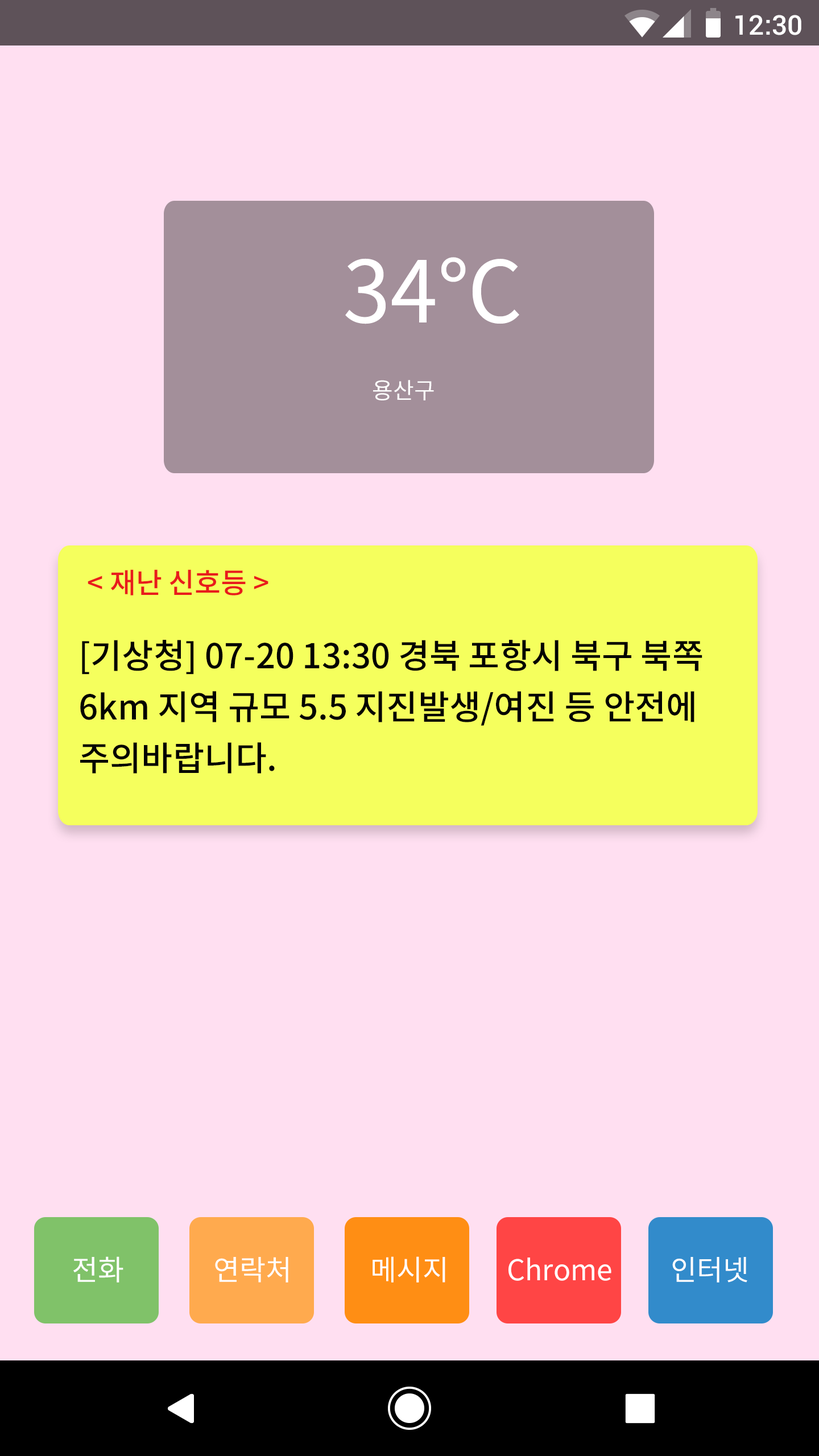
<style>
.page{position:relative;width:819px;height:1456px;background:#ffdff1}
.page>*{position:absolute;margin:0}
.t1{font:27.3px "Roboto-Medium";color:#ffffff}
.t2{font:85.3px "NotoSansCJKkr-Regular";color:#ffffff}
.t3{font:22.7px "NotoSansCJKkr-Regular";color:#ffffff}
.t4{font:28.4px "NotoSansCJKkr-Medium";color:#e81c1c}
.t5{font:34.1px/51.2px "NotoSansCJKkr-Medium";color:#030303}
.t6{font:28.4px "NotoSansCJKkr-Regular";color:#ffffff}
</style>
<div class="page">
<p class="t1" style="left:735px;top:15px;width:66px;height:20px">12:30</p>
<p class="t2" style="left:345px;top:257px;width:174px;height:67px">34℃</p>
<p class="t3" style="left:373px;top:380px;width:61px;height:20px">용산구</p>
<p class="t4" style="left:88px;top:569px;width:180px;height:26px">&lt; 재난 신호등 &gt;</p>
<p class="t5" style="left:80px;top:640px;width:622px;height:133px">[기상청] 07-20 13:30 경북 포항시 북구 북쪽 <br>6km 지역 규모 5.5 지진발생/여진 등 안전에 <br>주의바랍니다.</p>
<p class="t6" style="left:73px;top:1256px;width:50px;height:27px">전화</p>
<p class="t6" style="left:215px;top:1257px;width:73px;height:26px">연락처</p>
<p class="t6" style="left:373px;top:1256px;width:72px;height:27px">메시지</p>
<p class="t6" style="left:508px;top:1257px;width:103px;height:24px">Chrome</p>
<p class="t6" style="left:672px;top:1257px;width:75px;height:26px">인터넷</p>
</div>
